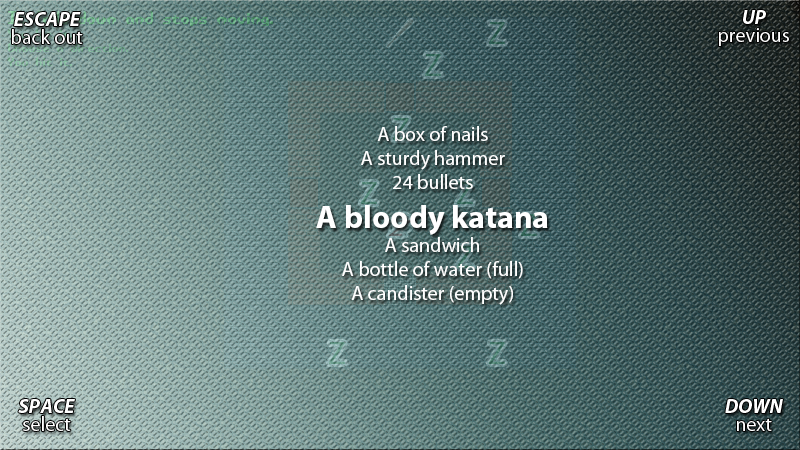
<style>
.page{position:relative;width:800px;height:450px}
.page>*{position:absolute;margin:0}
.t1{font:20px/18px "MyriadPro-Regular";color:#ffffff}
.t2{font:20px/18px "MyriadPro-BoldIt";color:#ffffff}
.t3{font:20px "MyriadPro-Regular";color:#ffffff}
.t4{font:32px "MyriadPro-Bold";color:#ffffff}
</style>
<div class="page">
<p class="t1" style="left:12px;top:12px;width:71px;height:32px;text-align:center"><span class="t2">ESCAPE<br></span>back out</p>
<p class="t1" style="left:719px;top:10px;width:70px;height:36px;text-align:center"><span class="t2">UP<br></span>previous</p>
<p class="t3" style="left:316px;top:126px;width:232px;height:179px;text-align:center">A box of nails<br>A sturdy hammer<br>24 bullets<br><span class="t4">A bloody katana<br></span>A sandwich<br>A bottle of water (full)<br>A candister (empty)</p>
<p class="t1" style="left:18px;top:399px;width:57px;height:32px;text-align:center"><span class="t2">SPACE<br></span>select</p>
<p class="t2" style="left:725px;top:399px;width:58px;height:32px;text-align:center">DOWN<br><span class="t1">next</span></p>
</div>
